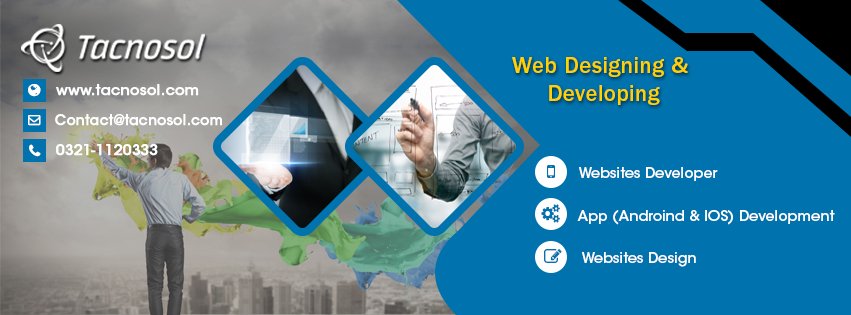
<style>
.page{position:relative;width:851px;height:315px;background:#0072ad}
.page>*{position:absolute;margin:0}
.t1{font:23.1px "ITCFranklinGothicStd-Med";letter-spacing:0.01em;color:#ffd100}
.t2{font:14px "ITCAvantGardeStd-Md";letter-spacing:0.01em;color:#ffffff;font-weight:bold}
.t3{font:14px "ITCAvantGardeStd-Md";letter-spacing:0.01em;color:#ffffff;font-weight:bold;scale:0.97 1}
.t4{font:13.8px "ITCAvantGardeStd-Md";letter-spacing:0.01em;color:#ffffff}
</style>
<div class="page">
<p class="t1" style="left:512px;top:57px;width:176px;height:48px;text-align:center">Web Designing &amp;<br> Developing</p>
<p class="t2" style="left:56px;top:84px;width:143px;height:12px">www.tacnosol.com</p>
<p class="t3" style="left:55px;top:114px;width:167px;height:12px">Contact@tacnosol.com</p>
<p class="t2" style="left:56px;top:144px;width:102px;height:12px">0321-1120333</p>
<p class="t4" style="left:579px;top:167px;width:139px;height:14px">Websites Developer</p>
<p class="t4" style="left:577px;top:210px;width:258px;height:15px">App (Androind &amp; IOS) Development</p>
<p class="t4" style="left:582px;top:252px;width:114px;height:15px">Websites Design</p>
</div>
